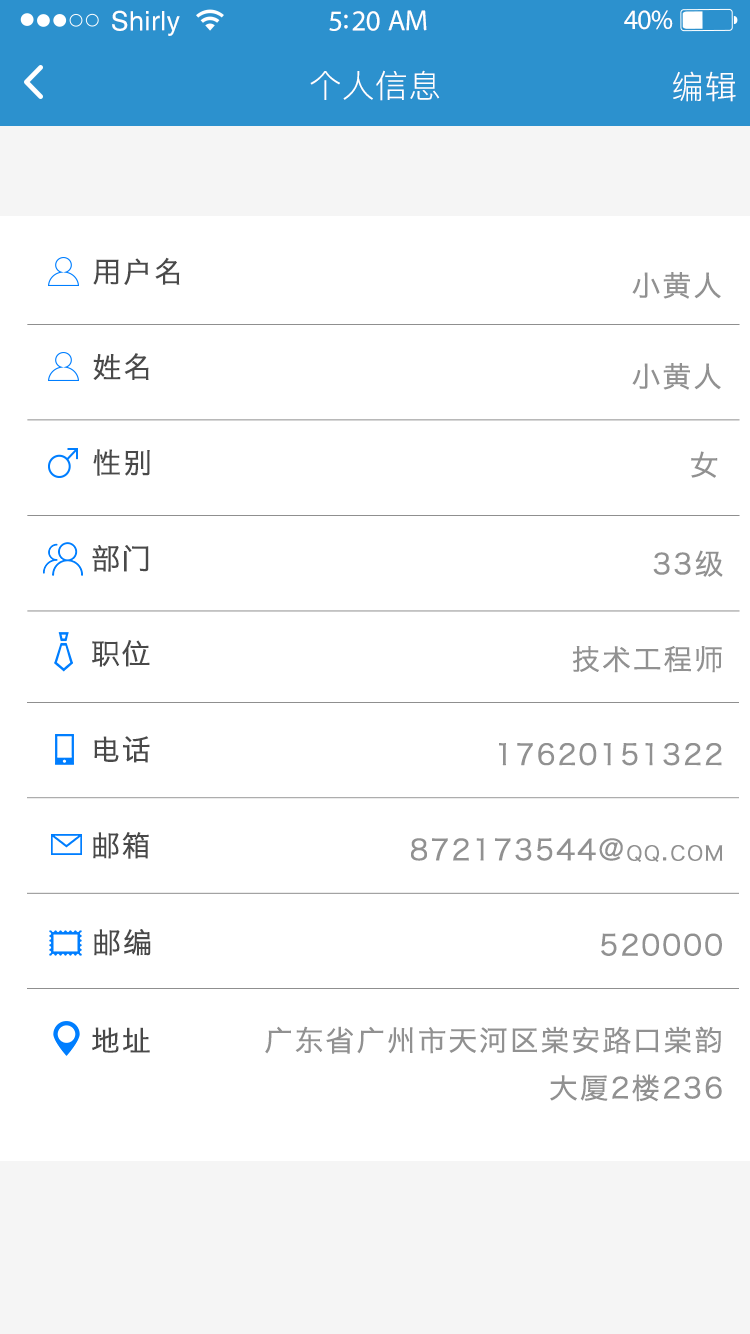
<style>
.page{position:relative;width:750px;height:1334px;background:#ffffff}
.page>*{position:absolute;margin:0}
.t1{font:26.8px "Helvetica";letter-spacing:0.02em;color:#ffffff}
.t2{font:29.1px "MyriadPro-Regular";letter-spacing:-0.02em;color:#ffffff}
.t3{font:27.9px "MyriadPro-Regular";letter-spacing:-0.02em;color:#ffffff}
.t4{font:32px "PingFang-SC-Regular";letter-spacing:0.03em;color:#ffffff}
.t5{font:32.1px "PingFang-SC-Regular";letter-spacing:0.03em;color:#ffffff}
.t6{font:28.5px "HiraginoSansGB-W3";letter-spacing:0.05em;color:#494949;font-variant:small-caps;font-weight:bold}
.t7{font:28.5px "HiraginoSansGB-W3";letter-spacing:0.05em;color:#919191;font-variant:small-caps;font-weight:bold}
.t8{font:28.5px/47.6px "HiraginoSansGB-W3";letter-spacing:0.05em;color:#919191;font-variant:small-caps;font-weight:bold}
</style>
<div class="page">
<p class="t1" style="left:112px;top:10px;width:68px;height:26px">Shirly</p>
<p class="t2" style="left:329px;top:10px;width:98px;height:21px">5:20 AM</p>
<p class="t3" style="left:624px;top:10px;width:49px;height:20px">40%</p>
<p class="t4" style="left:310px;top:70px;width:130px;height:31px">个人信息</p>
<p class="t5" style="left:673px;top:71px;width:63px;height:31px">编辑</p>
<p class="t6" style="left:93px;top:257px;width:87px;height:28px">用户名</p>
<p class="t7" style="left:632px;top:272px;width:89px;height:27px">小黄人</p>
<p class="t6" style="left:93px;top:353px;width:56px;height:27px">姓名</p>
<p class="t7" style="left:632px;top:363px;width:89px;height:27px">小黄人</p>
<p class="t6" style="left:93px;top:449px;width:57px;height:27px">性别</p>
<p class="t7" style="left:691px;top:451px;width:27px;height:27px">女</p>
<p class="t6" style="left:92px;top:545px;width:57px;height:27px">部门</p>
<p class="t8" style="left:265px;top:550px;width:458px;height:552px;text-align:right">33级<br><br>技术工程师<br><br>17620151322<br><br>872173544@qq.com<br><br>520000<br><br>广东省广州市天河区棠安路口棠韵<br>大厦2楼236</p>
<p class="t6" style="left:92px;top:640px;width:58px;height:27px">职位</p>
<p class="t6" style="left:94px;top:736px;width:56px;height:27px">电话</p>
<p class="t6" style="left:93px;top:832px;width:56px;height:27px">邮箱</p>
<p class="t6" style="left:94px;top:929px;width:57px;height:27px">邮编</p>
<p class="t6" style="left:92px;top:1027px;width:58px;height:26px">地址</p>
</div>
